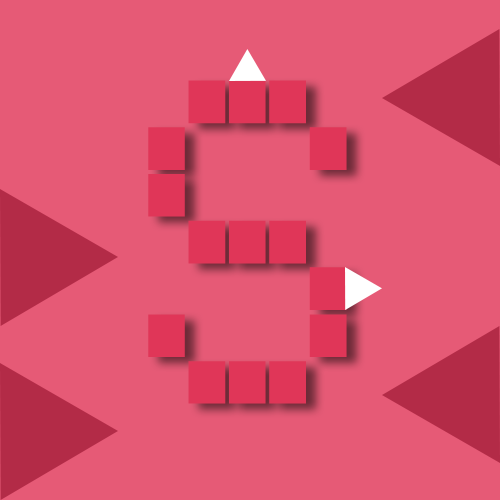
<style>
.page{position:relative;width:500px;height:500px;background:#e65a76}
.page>*{position:absolute;margin:0}
.t1{font:431.7px "ElectronicHighwaySign";letter-spacing:0.305em;color:#e03658;scale:0.86 1}
</style>
<div class="page">
<p class="t1" style="left:148px;top:80px;width:199px;height:324px">S</p>
</div>
